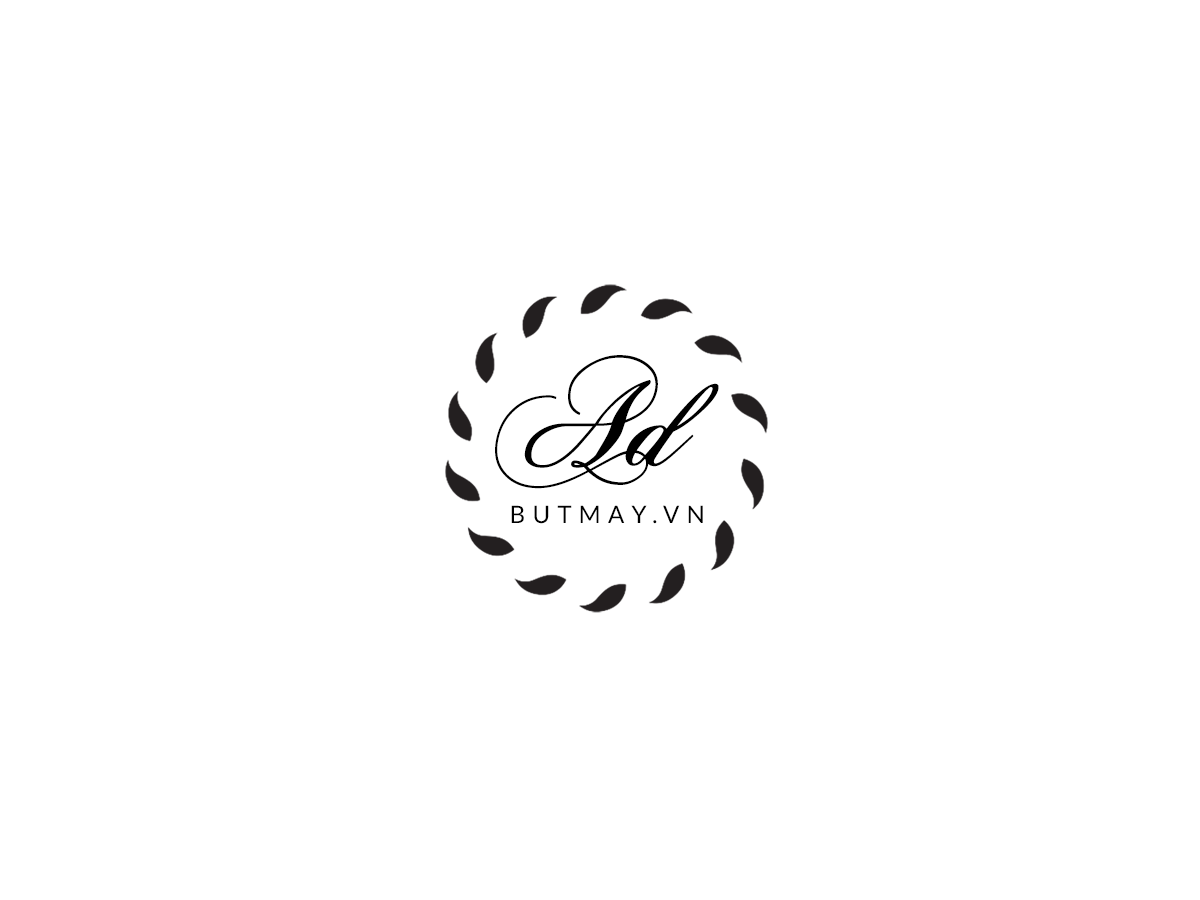
<style>
.page{position:relative;width:1200px;height:900px;background:#ffffff}
.page>*{position:absolute;margin:0}
.t1{font:126.3px "ChopinScript";color:#000000;font-weight:bold;font-style:italic}
.t2{font:24px "Lato-Regular";letter-spacing:0.3em;color:#000000}
</style>
<div class="page">
<p class="t1" style="left:495px;top:355px;width:224px;height:134px">Ad</p>
<p class="t2" style="left:511px;top:505px;width:192px;height:19px">BUTMAY.VN</p>
</div>
